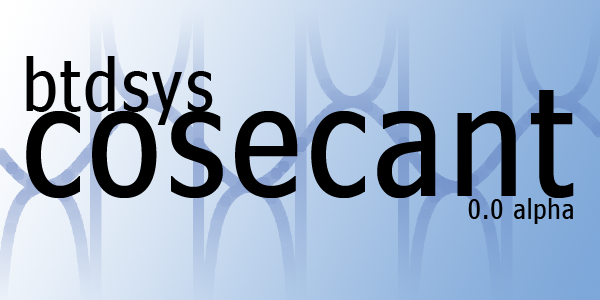
<style>
.page{position:relative;width:600px;height:300px}
.page>*{position:absolute;margin:0}
.t1{font:72px "Nina";letter-spacing:0.05em;color:#000000}
.t2{font:153px "Nina";letter-spacing:0.05em;color:#000000}
.t3{font:27px "Nina";letter-spacing:0.05em;color:#000000}
</style>
<div class="page">
<p class="t1" style="left:26px;top:56px;width:187px;height:69px">btdsys</p>
<p class="t2" style="left:26px;top:90px;width:548px;height:108px">cosecant</p>
<p class="t3" style="left:468px;top:198px;width:105px;height:26px">0.0 alpha</p>
</div>
